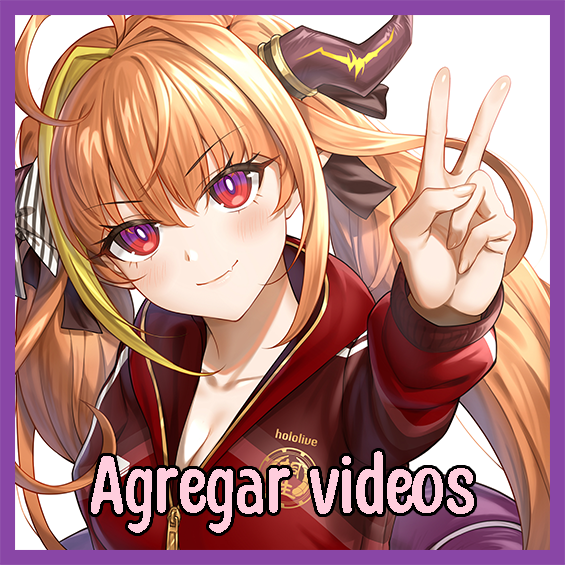
<style>
.page{position:relative;width:565px;height:565px}
.page>*{position:absolute;margin:0}
.t1{font:89.1px "HoneyNotes-Regular";color:#ffcddd}
</style>
<div class="page">
<p class="t1" style="left:91px;top:451px;width:383px;height:82px">Agregar videos</p>
</div>
